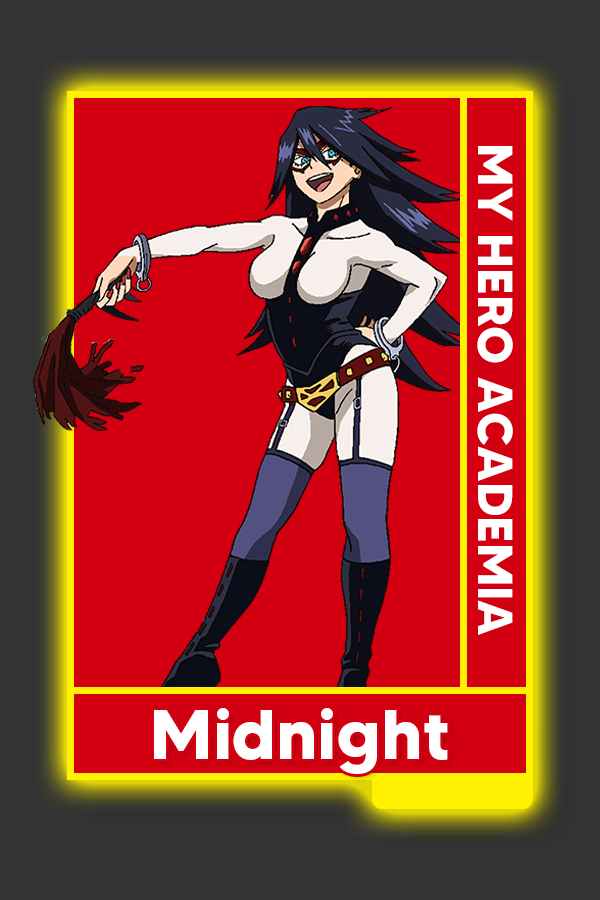
<style>
.page{position:relative;width:600px;height:900px;background:#d20010}
.page>*{position:absolute;margin:0}
.t1{font:48.8px "MADETOMMY-Bold";color:#ffffff}
.t2{font:70.1px "MADETOMMY-Bold";color:#ffffff}
</style>
<div class="page">
<p class="t1" style="left:477px;top:146px;width:36px;height:489px;rotate:90deg">MY HERO ACADEMIA</p>
<p class="t2" style="left:154px;top:708px;width:294px;height:66px">Midnight</p>
</div>
